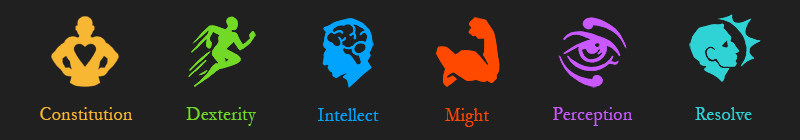
<style>
.page{position:relative;width:800px;height:140px;background:#202020}
.page>*{position:absolute;margin:0}
.t1{font:19.8px "Garamond";letter-spacing:0.025em;color:#f7b733;scale:0.91 1}
.t2{font:19.8px "Garamond";letter-spacing:0.025em;color:#72da26;scale:0.91 1}
.t3{font:19.8px "Garamond";letter-spacing:0.025em;color:#00a4ff;scale:0.91 1}
.t4{font:19.8px "Garamond";letter-spacing:0.025em;color:#ff4800;scale:0.91 1}
.t5{font:19.8px "Garamond";letter-spacing:0.025em;color:#ca58ff;scale:0.91 1}
.t6{font:19.8px "Garamond";letter-spacing:0.025em;color:#30d3d5;scale:0.91 1}
</style>
<div class="page">
<p class="t1" style="left:40px;top:107px;width:93px;height:13px">Constitution</p>
<p class="t2" style="left:186px;top:107px;width:70px;height:19px">Dexterity</p>
<p class="t3" style="left:318px;top:108px;width:61px;height:13px">Intellect</p>
<p class="t4" style="left:445px;top:108px;width:44px;height:19px">Might</p>
<p class="t5" style="left:553px;top:107px;width:80px;height:19px">Perception</p>
<p class="t6" style="left:695px;top:107px;width:57px;height:13px">Resolve</p>
</div>
